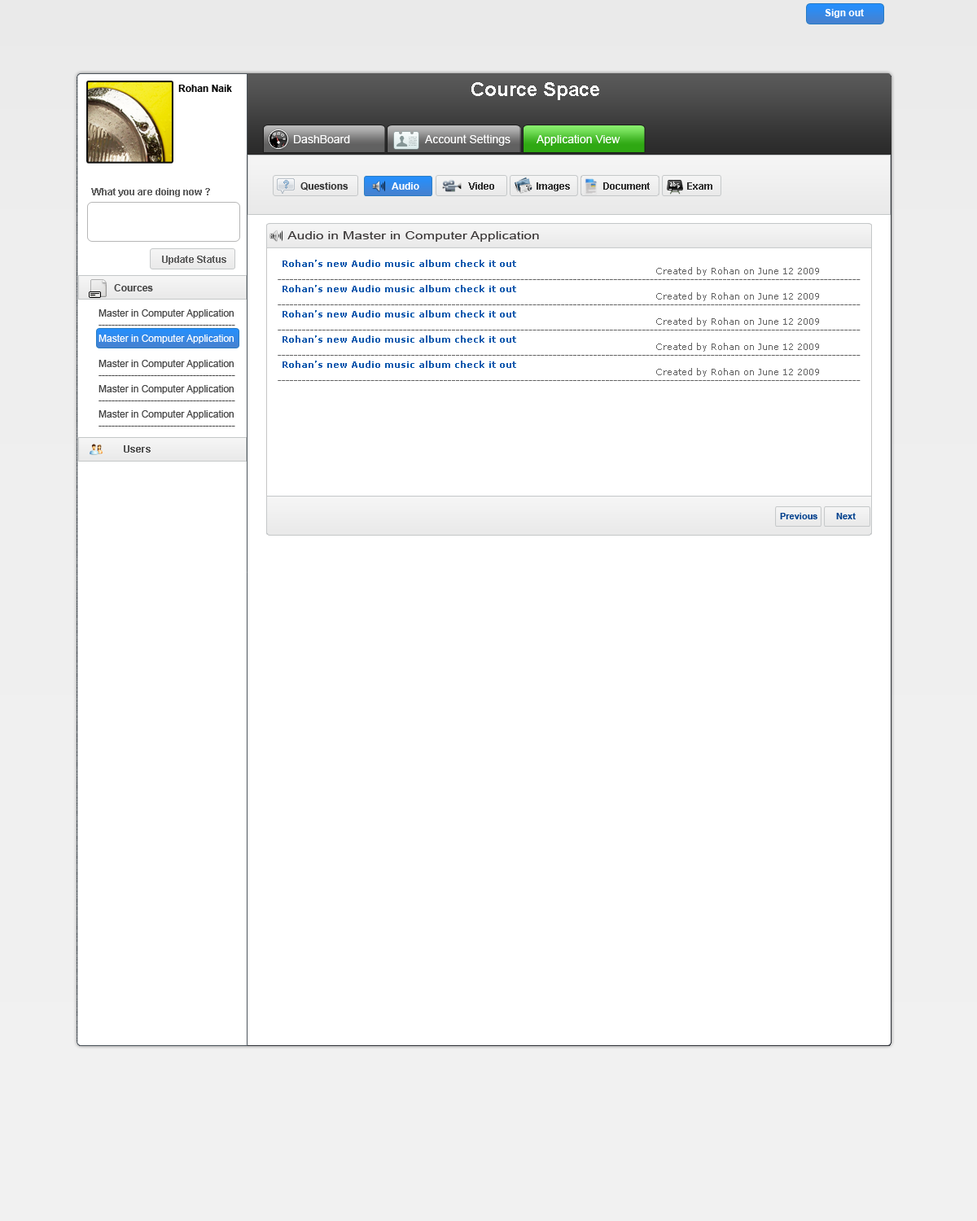
<style>
.page{position:relative;width:977px;height:1221px;background:#ffffff}
.page>*{position:absolute;margin:0}
.t1{font:9.8px "Arial-BoldMT";color:#ffffff}
.t2{font:9.8px "Arial-BoldMT";color:#060606}
.t3{font:19.5px "Arial-BoldMT";color:#ffffff}
.t4{font:11.4px "ArialMT";color:#ffffff}
.t5{font:9.8px "Arial-BoldMT";color:#323232}
.t6{font:9.8px "Arial-BoldMT";color:#626262}
.t7{font:11.4px "ArialMT";color:#373333;scale:1.24 1}
.t8{font:9px "Verdana-Bold";color:#105aae}
.t9{font:9px "Verdana";color:#626262}
.t10{font:9.8px "ArialMT";color:#616161;scale:1.24 1}
.t11{font:9.8px "Arial-BoldMT";color:#464646}
.t12{font:9.8px "ArialMT";color:#464646}
.t13{font:9.8px "ArialMT";color:#ffffff}
.t14{font:9.8px "Arial-BoldMT";color:#545454}
.t15{font:9px "Arial-BoldMT";color:#02418e}
</style>
<div class="page">
<p class="t1" style="left:824px;top:9px;width:40px;height:9px">Sign out</p>
<p class="t2" style="left:178px;top:85px;width:54px;height:7px">Rohan Naik</p>
<p class="t3" style="left:471px;top:82px;width:128px;height:18px">Cource Space</p>
<p class="t4" style="left:294px;top:135px;width:56px;height:8px">DashBoard</p>
<p class="t4" style="left:425px;top:134px;width:85px;height:12px">Account Settings</p>
<p class="t4" style="left:536px;top:134px;width:84px;height:12px">Application View</p>
<p class="t5" style="left:300px;top:182px;width:48px;height:8px">Questions</p>
<p class="t1" style="left:391px;top:182px;width:28px;height:8px">Audio</p>
<p class="t5" style="left:468px;top:182px;width:26px;height:8px">Video</p>
<p class="t5" style="left:536px;top:182px;width:34px;height:9px">Images</p>
<p class="t5" style="left:603px;top:182px;width:47px;height:8px">Document</p>
<p class="t5" style="left:687px;top:182px;width:25px;height:8px">Exam</p>
<p class="t6" style="left:91px;top:188px;width:119px;height:9px">What you are doing now ?</p>
<p class="t7" style="left:287px;top:231px;width:252px;height:11px">Audio in Master in Computer Application</p>
<p class="t6" style="left:162px;top:256px;width:64px;height:9px">Update Status</p>
<p class="t8" style="left:282px;top:260px;width:234px;height:7px">Rohan’s new Audio music album check it out</p>
<p class="t9" style="left:656px;top:267px;width:163px;height:9px">Created by Rohan on June 12 2009</p>
<p class="t10" style="left:278px;top:279px;width:582px;height:1px">------------------------------------------------------------------------------------------------------------------------------------------------</p>
<p class="t11" style="left:114px;top:284px;width:39px;height:7px">Cources</p>
<p class="t8" style="left:282px;top:285px;width:234px;height:7px">Rohan’s new Audio music album check it out</p>
<p class="t9" style="left:656px;top:292px;width:163px;height:9px">Created by Rohan on June 12 2009</p>
<p class="t10" style="left:278px;top:304px;width:582px;height:1px">------------------------------------------------------------------------------------------------------------------------------------------------</p>
<p class="t12" style="left:98px;top:309px;width:137px;height:17px">Master in Computer Application<br>------------------------------------------</p>
<p class="t8" style="left:282px;top:310px;width:234px;height:7px">Rohan’s new Audio music album check it out</p>
<p class="t9" style="left:656px;top:317px;width:163px;height:9px">Created by Rohan on June 12 2009</p>
<p class="t10" style="left:278px;top:330px;width:582px;height:0px">------------------------------------------------------------------------------------------------------------------------------------------------</p>
<p class="t13" style="left:98px;top:335px;width:137px;height:16px">Master in Computer Application<br>------------------------------------------</p>
<p class="t8" style="left:282px;top:335px;width:234px;height:8px">Rohan’s new Audio music album check it out</p>
<p class="t9" style="left:656px;top:343px;width:163px;height:9px">Created by Rohan on June 12 2009</p>
<p class="t12" style="left:98px;top:360px;width:137px;height:16px">Master in Computer Application<br>------------------------------------------</p>
<p class="t10" style="left:278px;top:355px;width:582px;height:1px">------------------------------------------------------------------------------------------------------------------------------------------------</p>
<p class="t8" style="left:282px;top:361px;width:234px;height:7px">Rohan’s new Audio music album check it out</p>
<p class="t9" style="left:656px;top:368px;width:163px;height:9px">Created by Rohan on June 12 2009</p>
<p class="t12" style="left:98px;top:385px;width:137px;height:16px">Master in Computer Application<br>------------------------------------------</p>
<p class="t10" style="left:278px;top:380px;width:582px;height:1px">------------------------------------------------------------------------------------------------------------------------------------------------</p>
<p class="t12" style="left:98px;top:410px;width:137px;height:16px">Master in Computer Application<br>------------------------------------------</p>
<p class="t14" style="left:124px;top:445px;width:27px;height:8px">Users</p>
<p class="t15" style="left:780px;top:513px;width:37px;height:6px">Previous</p>
<p class="t15" style="left:836px;top:513px;width:19px;height:6px">Next</p>
</div>
